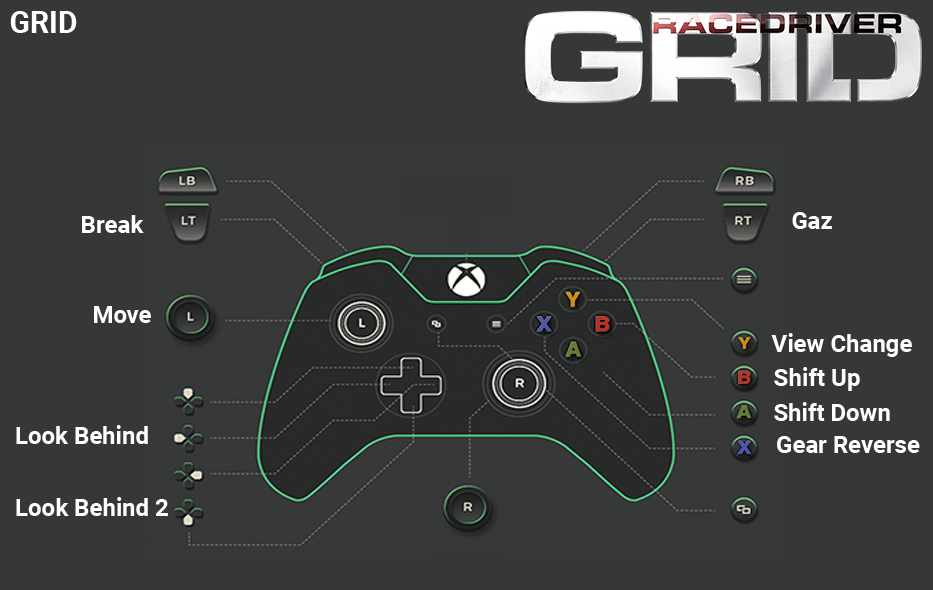
<style>
.page{position:relative;width:933px;height:590px;background:#363838}
.page>*{position:absolute;margin:0}
.t1{font:30px "Roboto-Bold";color:#ffffff}
.t2{font:24px "Roboto-Bold";color:#ffffff}
</style>
<div class="page">
<p class="t1" style="left:10px;top:11px;width:67px;height:22px">GRID</p>
<p class="t2" style="left:82px;top:215px;width:62px;height:18px">Break</p>
<p class="t2" style="left:792px;top:212px;width:40px;height:17px">Gaz</p>
<p class="t2" style="left:94px;top:306px;width:57px;height:17px">Move</p>
<p class="t2" style="left:771px;top:333px;width:141px;height:24px">View Change</p>
<p class="t2" style="left:774px;top:367px;width:86px;height:24px">Shift Up</p>
<p class="t2" style="left:774px;top:402px;width:116px;height:19px">Shift Down</p>
<p class="t2" style="left:16px;top:425px;width:132px;height:19px">Look Behind</p>
<p class="t2" style="left:777px;top:436px;width:143px;height:17px">Gear Reverse</p>
<p class="t2" style="left:16px;top:497px;width:152px;height:19px">Look Behind 2</p>
</div>
